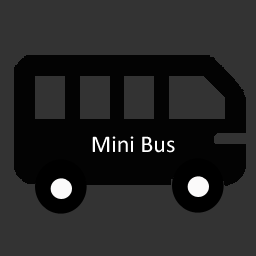
<style>
.page{position:relative;width:256px;height:256px;background:#333333}
.page>*{position:absolute;margin:0}
.t1{font:24px "Calibri";color:#ffffff}
</style>
<div class="page">
<p class="t1" style="left:92px;top:136px;width:83px;height:17px">Mini Bus</p>
</div>
